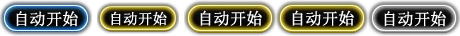
<style>
.page{position:relative;width:460px;height:36px}
.page>*{position:absolute;margin:0}
.t1{font:16px "SimSun";color:#ffffff;font-weight:bold}
.t2{font:14.4px "SimSun";color:#ffffff;font-weight:bold}
</style>
<div class="page">
<p class="t1" style="left:16px;top:11px;width:62px;height:16px">自动开始</p>
<p class="t2" style="left:111px;top:11px;width:56px;height:15px">自动开始</p>
<p class="t1" style="left:200px;top:10px;width:62px;height:16px">自动开始</p>
<p class="t1" style="left:292px;top:10px;width:62px;height:16px">自动开始</p>
<p class="t1" style="left:384px;top:11px;width:62px;height:16px">自动开始</p>
</div>
